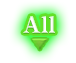
<style>
.page{position:relative;width:76px;height:63px;background:#ffffff}
.page>*{position:absolute;margin:0}
.t1{font:22px "RyuminPro-ExBold";color:#f8fef5}
</style>
<div class="page">
<p class="t1" style="left:23px;top:16px;width:32px;height:17px">All</p>
<p class="t1" style="left:23px;top:16px;width:32px;height:17px">All</p>
</div>
